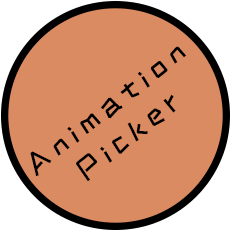
<style>
.page{position:relative;width:230px;height:230px;background:#db8b62}
.page>*{position:absolute;margin:0}
.t1{font:29.7px "ZCOOLKuaiLe-Regular";letter-spacing:0.2em;color:#000000}
</style>
<div class="page">
<p class="t1" style="left:30px;top:46px;width:157px;height:136px;text-align:center;rotate:-38deg">Animation<br>Picker</p>
</div>
